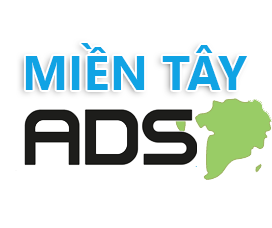
<style>
.page{position:relative;width:272px;height:228px;background:#ffffff}
.page>*{position:absolute;margin:0}
.t1{font:47.6px "SegoeUI-Bold";letter-spacing:0.011em;color:#10a3e4}
</style>
<div class="page">
<p class="t1" style="left:25px;top:43px;width:222px;height:47px">MIỀN TÂY</p>
</div>
